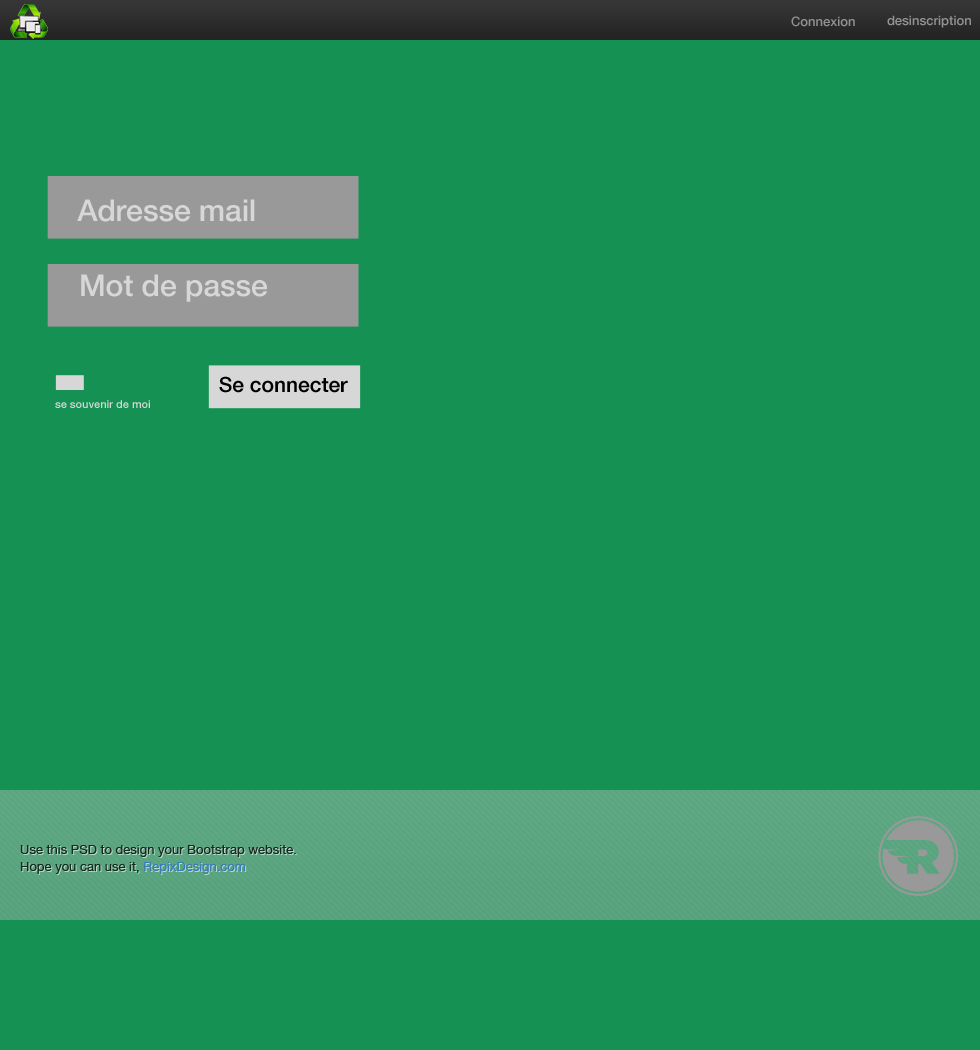
<style>
.page{position:relative;width:980px;height:1050px;background:#159253}
.page>*{position:absolute;margin:0}
.t1{font:13px "HelveticaNeue-Medium";color:#939393}
.t2{font:13px "HelveticaNeue-Medium"}
.t3{font:30px "HelveticaNeue-Medium";color:#d7d7d7}
.t4{font:21px "HelveticaNeue-Medium";color:#010101}
.t5{font:11px "HelveticaNeue-Medium";color:#d7d7d7}
.t6{font:13px/9px "HelveticaNeue";color:#172a20}
</style>
<div class="page">
<p class="t1" style="left:791px;top:16px;width:64px;height:11px">Connexion</p>
<p class="t1" style="left:791px;top:16px;width:64px;height:11px">Connexion</p>
<p class="t1" style="left:887px;top:15px;width:84px;height:13px">desinscription</p>
<p class="t2" style="left:888px;top:15px;width:62px;height:13px">Inscription</p>
<p class="t3" style="left:77px;top:199px;width:178px;height:23px">Adresse mail</p>
<p class="t3" style="left:81px;top:274px;width:186px;height:28px">Mot de passe</p>
<p class="t4" style="left:219px;top:376px;width:129px;height:17px">Se connecter</p>
<p class="t5" style="left:55px;top:400px;width:95px;height:8px">se souvenir de moi</p>
<p class="t6" style="left:20px;top:845px;width:276px;height:29px">Use this PSD to design your Bootstrap website.<br>Hope you can use it, RepixDesign.com</p>
</div>
